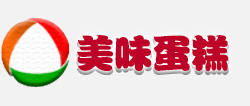
<style>
.page{position:relative;width:250px;height:106px;background:#f2f2f2}
.page>*{position:absolute;margin:0}
.t1{font:38.3px "FZPWJW--GB1-0";color:#bd0127}
</style>
<div class="page">
<p class="t1" style="left:77px;top:35px;width:152px;height:36px">美味蛋糕</p>
</div>
